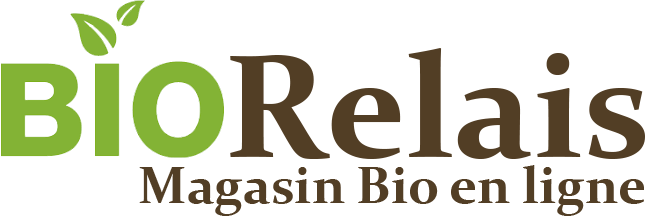
<style>
.page{position:relative;width:647px;height:216px;background:#ffffff}
.page>*{position:absolute;margin:0}
.t1{font:148px "Constantia-Bold";color:#523e25}
.t2{font:52px "Constantia-Bold";color:#523e25}
</style>
<div class="page">
<p class="t1" style="left:230px;top:48px;width:415px;height:111px">Relais</p>
<p class="t2" style="left:139px;top:165px;width:505px;height:51px">Magasin Bio en ligne</p>
</div>
